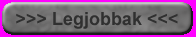
<style>
.page{position:relative;width:196px;height:37px}
.page>*{position:absolute;margin:0}
.t1{font:18px "Arial-BoldMT";color:#303030}
</style>
<div class="page">
<p class="t1" style="left:16px;top:12px;width:162px;height:17px">&gt;&gt;&gt; Legjobbak &lt;&lt;&lt;</p>
<p class="t1" style="left:16px;top:12px;width:162px;height:17px">&gt;&gt;&gt; Legjobbak &lt;&lt;&lt;</p>
</div>
